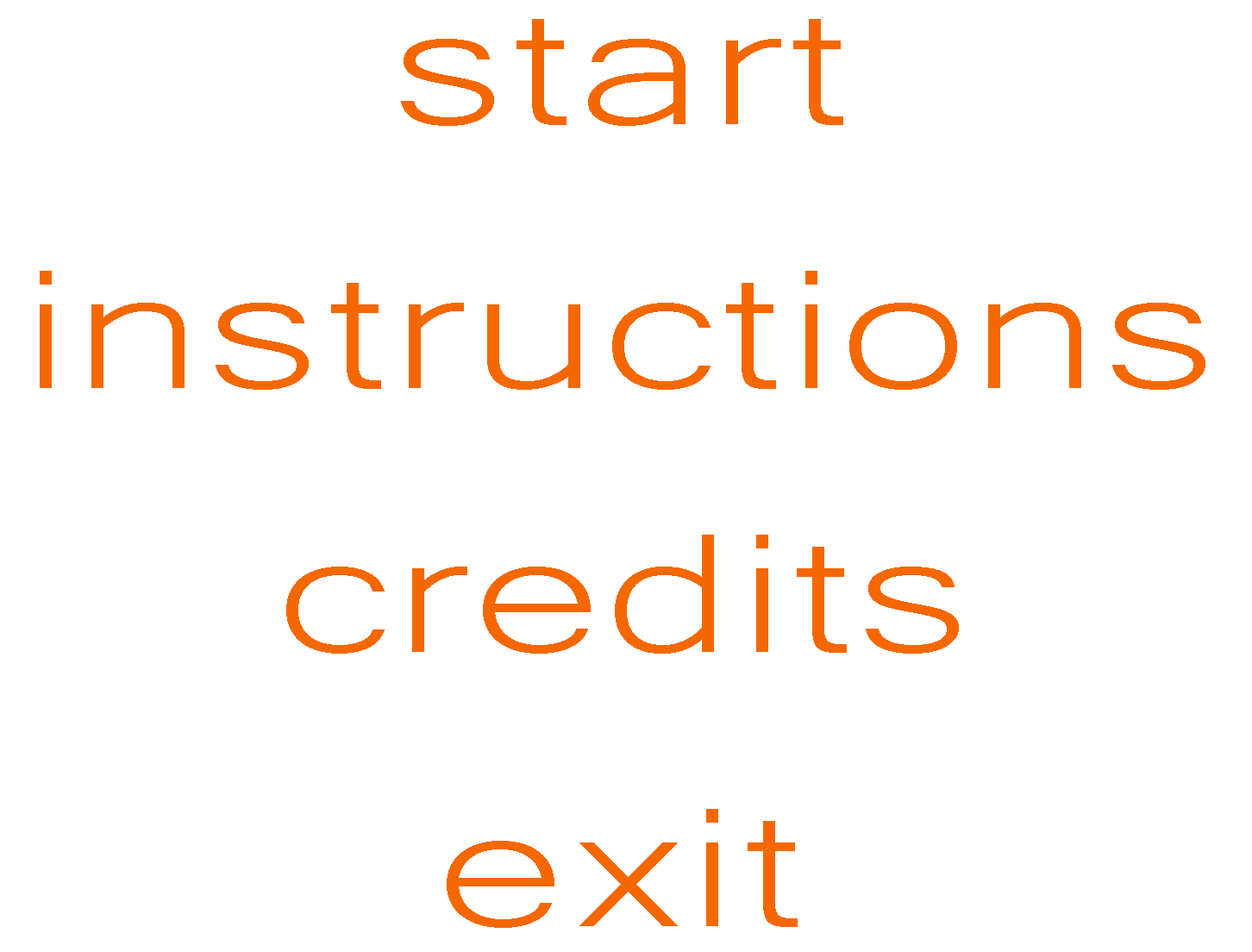
<style>
.page{position:relative;width:1252px;height:952px;background:#ffffff}
.page>*{position:absolute;margin:0}
.t1{font:220.1px "Microsoft-Yi-Baiti";color:#f56800;scale:1.44 1}
</style>
<div class="page">
<p class="t1" style="left:401px;top:19px;width:443px;height:107px">start</p>
<p class="t1" style="left:40px;top:271px;width:1166px;height:119px">instructions</p>
<p class="t1" style="left:286px;top:535px;width:673px;height:119px">credits</p>
<p class="t1" style="left:447px;top:809px;width:351px;height:119px">exit</p>
</div>
